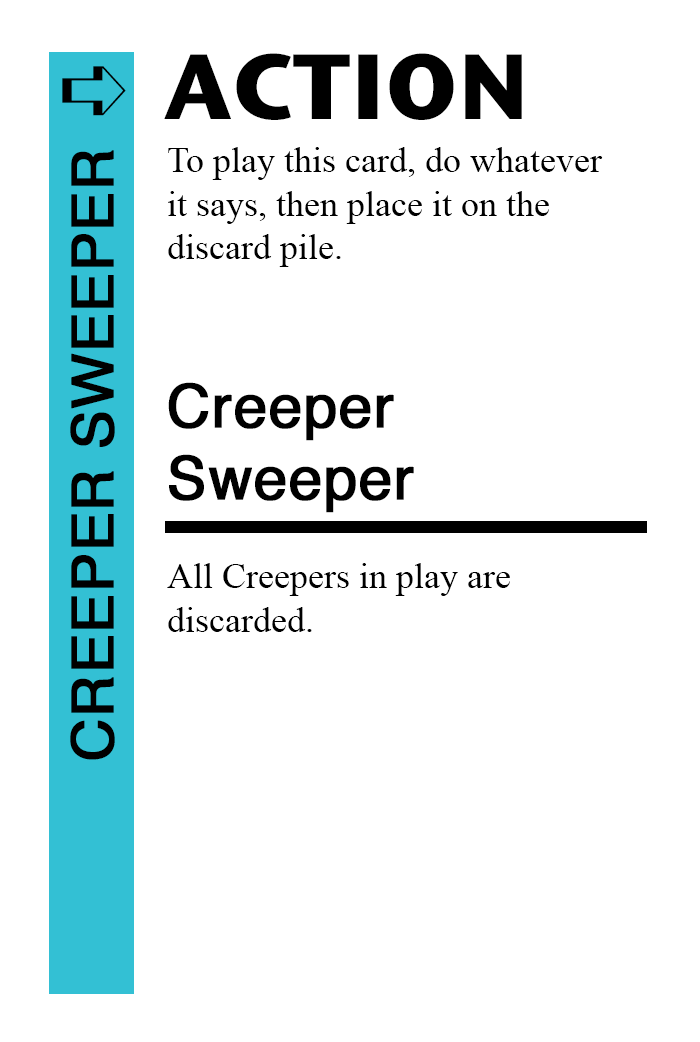
<style>
.page{position:relative;width:700px;height:1042px;background:#ffffff}
.page>*{position:absolute;margin:0}
.t1{font:92px "StoneSansITC-Bold";color:#000000}
.t2{font:82px "MS-Gothic";color:#000000}
.t3{font:58px "Helvetica";color:#000000;font-weight:bold}
.t4{font:36px "TimesNewRomanPSMT";color:#000000}
.t5{font:60px "Helvetica";color:#000000;font-weight:bold}
</style>
<div class="page">
<p class="t1" style="left:164px;top:53px;width:358px;height:67px">ACTION</p>
<p class="t2" style="left:62px;top:66px;width:64px;height:50px">➪</p>
<p class="t3" style="left:70px;top:150px;width:45px;height:610px;rotate:-90deg">CREEPER SWEEPER</p>
<p class="t4" style="left:168px;top:147px;width:435px;height:120px">To play this card, do whatever<br>it says, then place it on the<br>discard pile.</p>
<p class="t5" style="left:168px;top:382px;width:246px;height:131px">Creeper <br>Sweeper</p>
<p class="t4" style="left:167px;top:563px;width:343px;height:69px">All Creepers in play are <br>discarded.</p>
</div>
